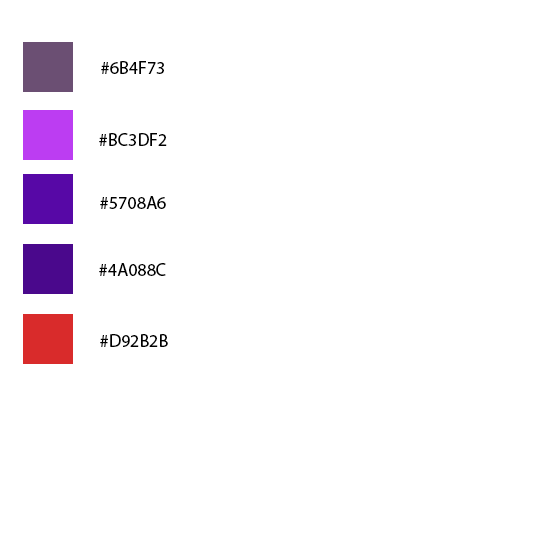
<style>
.page{position:relative;width:550px;height:550px;background:#ffffff}
.page>*{position:absolute;margin:0}
.t1{font:18px "MyriadPro-Regular";color:#000000}
</style>
<div class="page">
<p class="t1" style="left:101px;top:61px;width:63px;height:13px">#6B4F73</p>
<p class="t1" style="left:99px;top:133px;width:68px;height:13px">#BC3DF2</p>
<p class="t1" style="left:100px;top:196px;width:66px;height:13px">#5708A6</p>
<p class="t1" style="left:99px;top:263px;width:67px;height:13px">#4A088C</p>
<p class="t1" style="left:100px;top:334px;width:68px;height:13px">#D92B2B</p>
</div>
